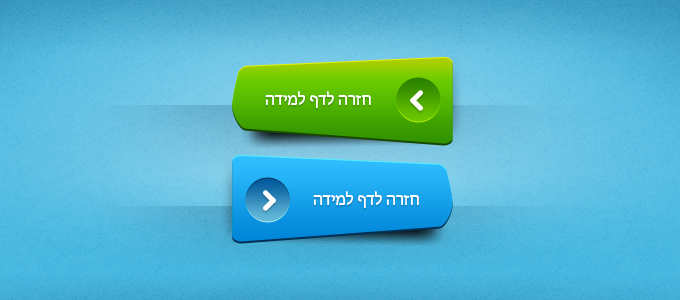
<style>
.page{position:relative;width:680px;height:300px}
.page>*{position:absolute;margin:0}
.t1{font:16.8px "MyriadHebrew-Regular";color:#ffffff}
</style>
<div class="page">
<p class="t1" style="left:265px;top:91px;width:106px;height:17px">הדימל ףדל הרזח</p>
<p class="t1" style="left:313px;top:191px;width:106px;height:17px">הדימל ףדל הרזח</p>
</div>
